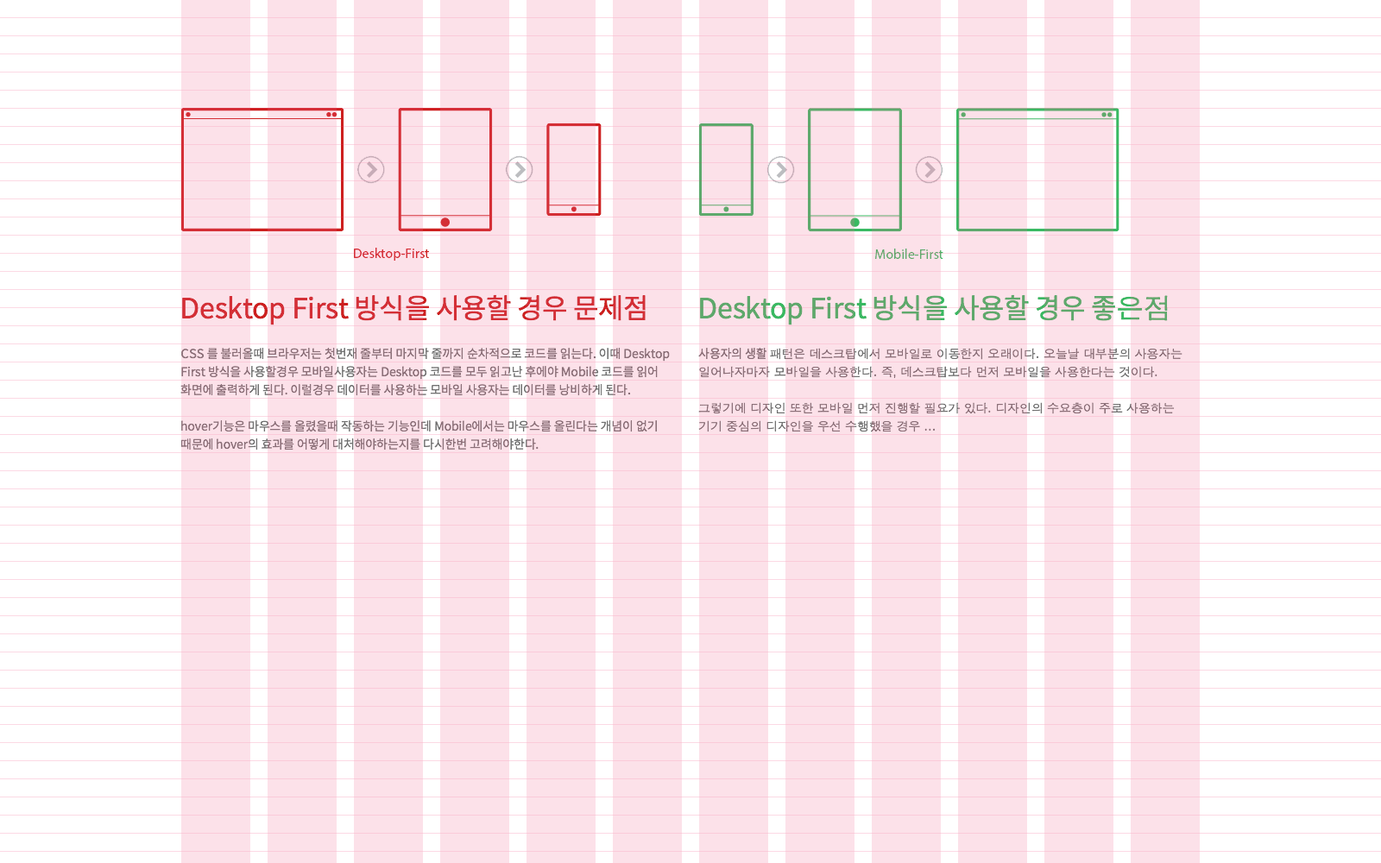
<style>
.page{position:relative;width:1381px;height:863px;background:#fce1e9}
.page>*{position:absolute;margin:0}
.t1{font:27.6px "SpoqaHanSans-Regular";letter-spacing:-0.01em;color:#cd201f}
.t2{font:27.6px "SpoqaHanSans-Regular";letter-spacing:-0.01em;color:#5ea96c}
.t3{font:27.6px "AppleGothic";letter-spacing:-0.01em;color:#5ea96c}
.t4{font:12.1px "SpoqaHanSans-Regular";letter-spacing:-0.01em;color:#8b6f78}
.t5{font:12.1px "AppleGothic";letter-spacing:-0.01em;color:#8b6f78}
</style>
<div class="page">
<p class="t1" style="left:182px;top:294px;width:464px;height:31px">Desktop First 방식을 사용할 경우 문제점</p>
<p class="t2" style="left:700px;top:294px;width:468px;height:31px">Desktop First 방식을 사용할 경우 좋<span class="t3">은점</span></p>
<p class="t4" style="left:180px;top:348px;width:490px;height:103px">CSS 를 불러올때 브라우저는 첫번재 줄부터 마지막 줄까지 순차적으로 코드를 읽는다. 이때 Desktop First 방식을 사용할경우 모바일사용자는 Desktop 코드를 모두 읽고난 후에야 Mobile 코드를 읽어 화면에 출력하게 된다. 이럴경우 데이터를 사용하는 모바일 사용자는 데이터를 낭비하게 된다.<br>hover기능은 마우스를 올렸을때 작동하는 기능인데 Mobile에서는 마우스를 올린다는 개념이 없기 때문에 hover의 효과를 어떻게 대처해야하는지를 다시한번 고려해야한다.</p>
<p class="t5" style="left:698px;top:348px;width:485px;height:85px"><span class="t4">사용자의 생활 </span>패턴은 데스크탑에서 모바일로 이동한지 오래이다. 오늘날 대부분의 사용자는 일어나자마자 모바일을 사용한다. 즉, 데스크탑보다 먼저 모바일을 사용한다는 것이다.<br>그렇기에 디자인 또한 모바일 먼저 진행할 필요가 있다. 디자인의 수요층이 주로 사용하는 기기 중심의 디자인을 우선 수행했을 경우 ...</p>
</div>
